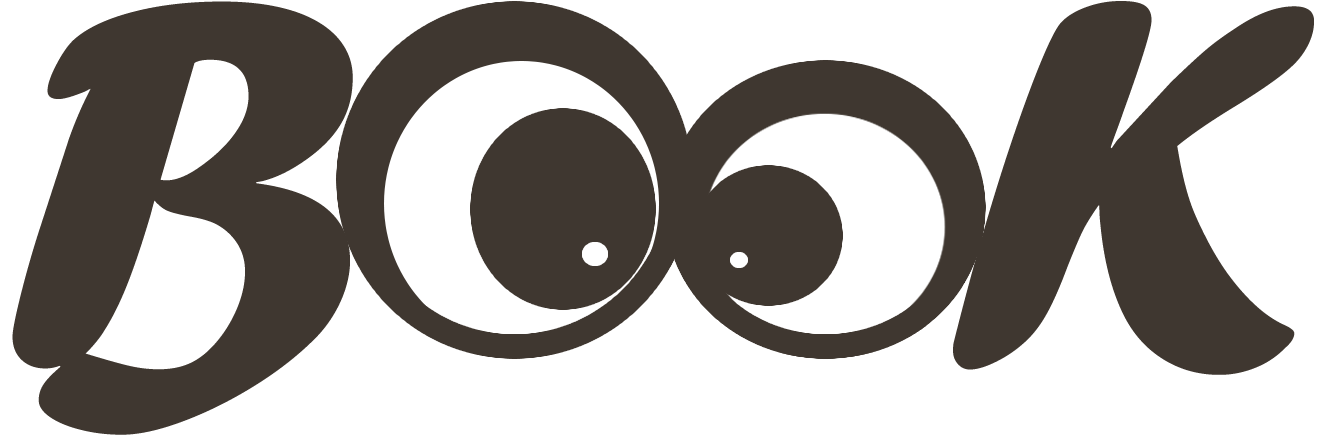
<style>
.page{position:relative;width:1318px;height:441px;background:#ffffff}
.page>*{position:absolute;margin:0}
.t1{font:547.4px "ForteMT";color:#3f3730}
</style>
<div class="page">
<p class="t1" style="left:12px;top:1px;width:1302px;height:434px">B    K</p>
</div>
